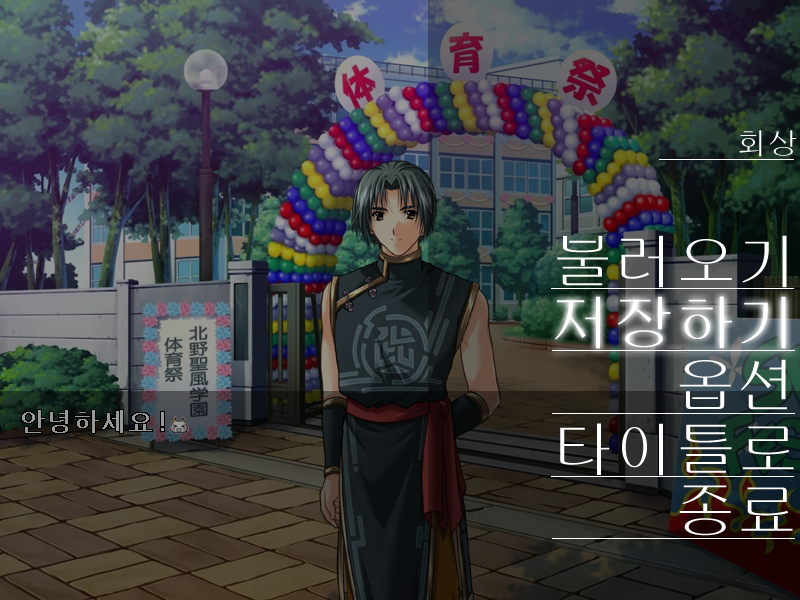
<style>
.page{position:relative;width:800px;height:600px}
.page>*{position:absolute;margin:0}
.t1{font:30px "H2gprM";letter-spacing:0.03em;color:#ffffff}
.t2{font:60px "H2gprM";letter-spacing:0.03em;color:#ffffff}
</style>
<div class="page">
<p class="t1" style="left:739px;top:130px;width:58px;height:27px">회상</p>
<p class="t2" style="left:557px;top:235px;width:230px;height:53px">불러오기</p>
<p class="t2" style="left:555px;top:296px;width:231px;height:53px">저장하기</p>
<p class="t2" style="left:679px;top:359px;width:108px;height:51px">옵션</p>
<p class="t2" style="left:560px;top:423px;width:234px;height:53px">타이틀로</p>
<p class="t2" style="left:679px;top:485px;width:114px;height:51px">종료</p>
</div>
